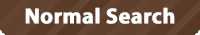
<style>
.page{position:relative;width:200px;height:35px;background:#654532}
.page>*{position:absolute;margin:0}
.t1{font:22px "MyriadPro-Bold";color:#ffffff;font-weight:bold}
</style>
<div class="page">
<p class="t1" style="left:25px;top:7px;width:150px;height:17px">Normal Search</p>
</div>
